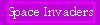
<style>
.page{position:relative;width:100px;height:25px;background:#be00da}
.page>*{position:absolute;margin:0}
.t1{font:13.9px "FootlightMTLight";color:#ffffff}
</style>
<div class="page">
<p class="t1" style="left:9px;top:6px;width:84px;height:13px">Space Invaders</p>
</div>
